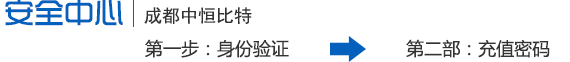
<style>
.page{position:relative;width:570px;height:62px;background:#ffffff}
.page>*{position:absolute;margin:0}
.t1{font:30px "TRENDS";color:#0360bd}
.t2{font:18px "SimHei";color:#333333}
.t3{font:18px "MicrosoftYaHei";color:#333333}
</style>
<div class="page">
<p class="t1" style="left:5px;top:0px;width:118px;height:26px">安全中心</p>
<p class="t2" style="left:144px;top:7px;width:108px;height:17px">成都中恒比特</p>
<p class="t3" style="left:145px;top:39px;width:405px;height:19px">第一步：身份验证                      第二部：充值密码</p>
</div>
